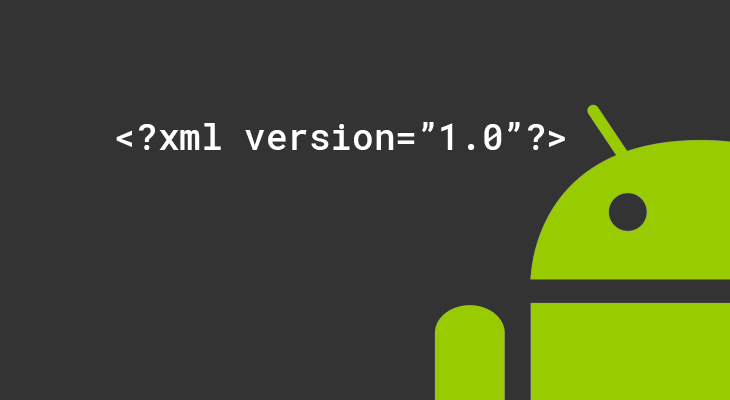
<style>
.page{position:relative;width:730px;height:400px;background:#333333}
.page>*{position:absolute;margin:0}
.t1{font:36px "RobotoMonoForPowerline-Medium";color:#ffffff}
</style>
<div class="page">
<p class="t1" style="left:116px;top:122px;width:449px;height:28px">&lt;?xml version=”1.0”?&gt;</p>
</div>
